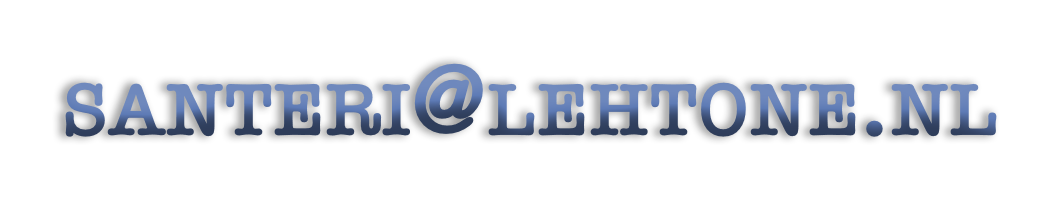
<style>
.page{position:relative;width:1061px;height:221px;background:#ffffff}
.page>*{position:absolute;margin:0}
.t1{font:108.7px "AmericanTypewriter-Semibold";letter-spacing:0.01em;font-variant:small-caps}
</style>
<div class="page">
<p class="t1" style="left:65px;top:63px;width:932px;height:74px">santeri@lehtone.nl</p>
</div>
